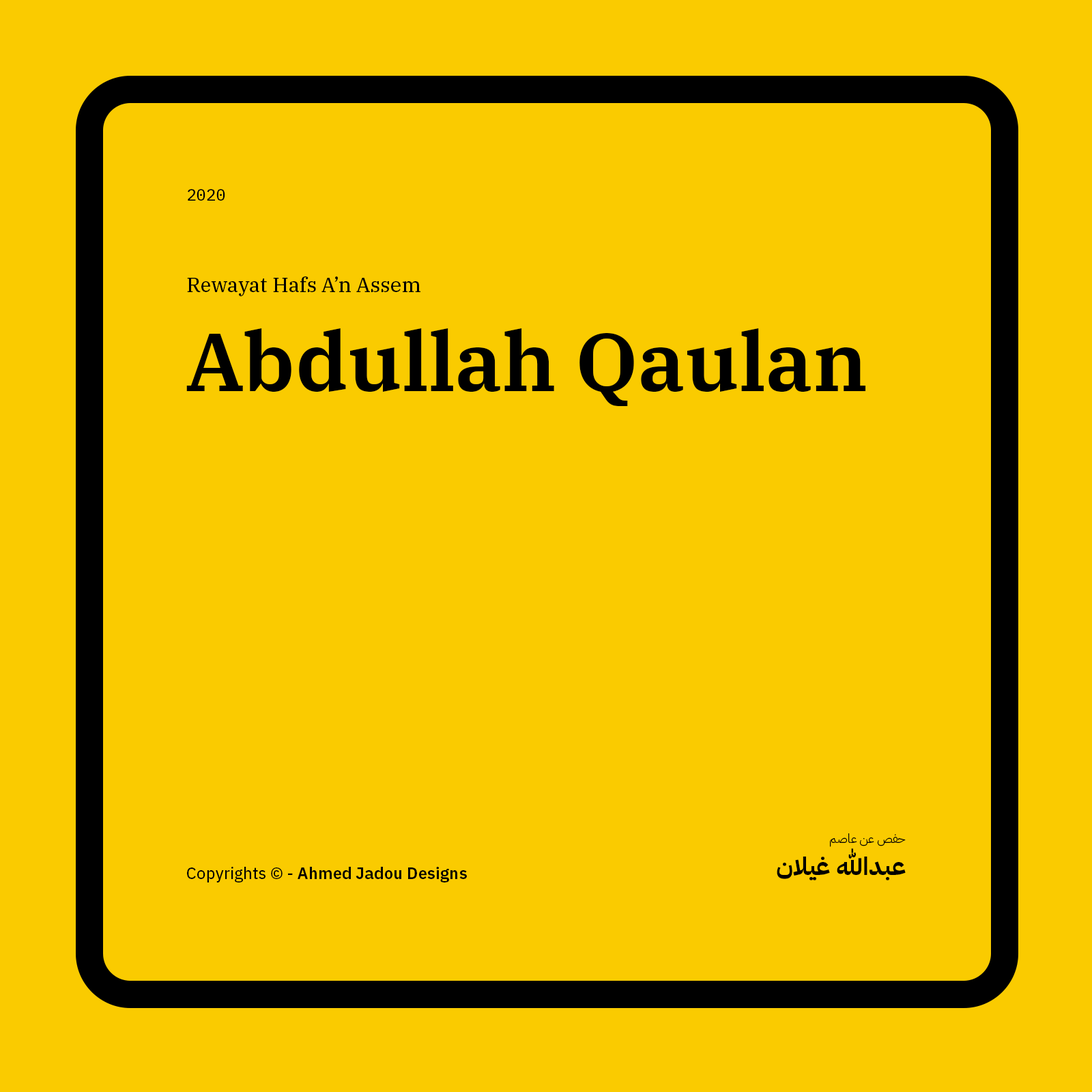
<style>
.page{position:relative;width:1092px;height:1092px;background:#facb00}
.page>*{position:absolute;margin:0}
.t1{font:16.4px "IBMPlexMono-Text";color:#000000}
.t2{font:20.5px "IBMPlexSerif-Text";color:#000000}
.t3{font:81.9px "IBMPlexSerif-SemiBold";color:#000000}
.t4{font:12.3px "IBMPlexArabic-Light";color:#000000}
.t5{font:24.6px "IBMPlexArabic-Bold";color:#000000}
.t6{font:16.4px "IBMPlexSans-SemiBold";color:#000000}
.t7{font:16.4px "IBMPlexSans-Text";color:#000000}
</style>
<div class="page">
<p class="t1" style="left:188px;top:189px;width:37px;height:12px">2020</p>
<p class="t2" style="left:187px;top:276px;width:233px;height:20px">Rewayat Hafs A’n Assem</p>
<p class="t3" style="left:186px;top:328px;width:680px;height:78px">Abdullah Qaulan</p>
<p class="t4" style="left:830px;top:833px;width:76px;height:14px">حفص عن عاصم</p>
<p class="t5" style="left:777px;top:848px;width:129px;height:32px">عبدالله غيلان</p>
<p class="t6" style="left:187px;top:867px;width:280px;height:15px"><span class="t7">Copyrights © - </span>Ahmed Jadou Designs</p>
</div>
